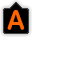
<style>
.page{position:relative;width:64px;height:64px;background:#ffffff}
.page>*{position:absolute;margin:0}
.t1{font:26.8px "ArialRoundedMTBold";color:#ff6600;text-transform:uppercase;scale:0.92 1}
</style>
<div class="page">
<p class="t1" style="left:7px;top:10px;width:17px;height:20px">A</p>
</div>
